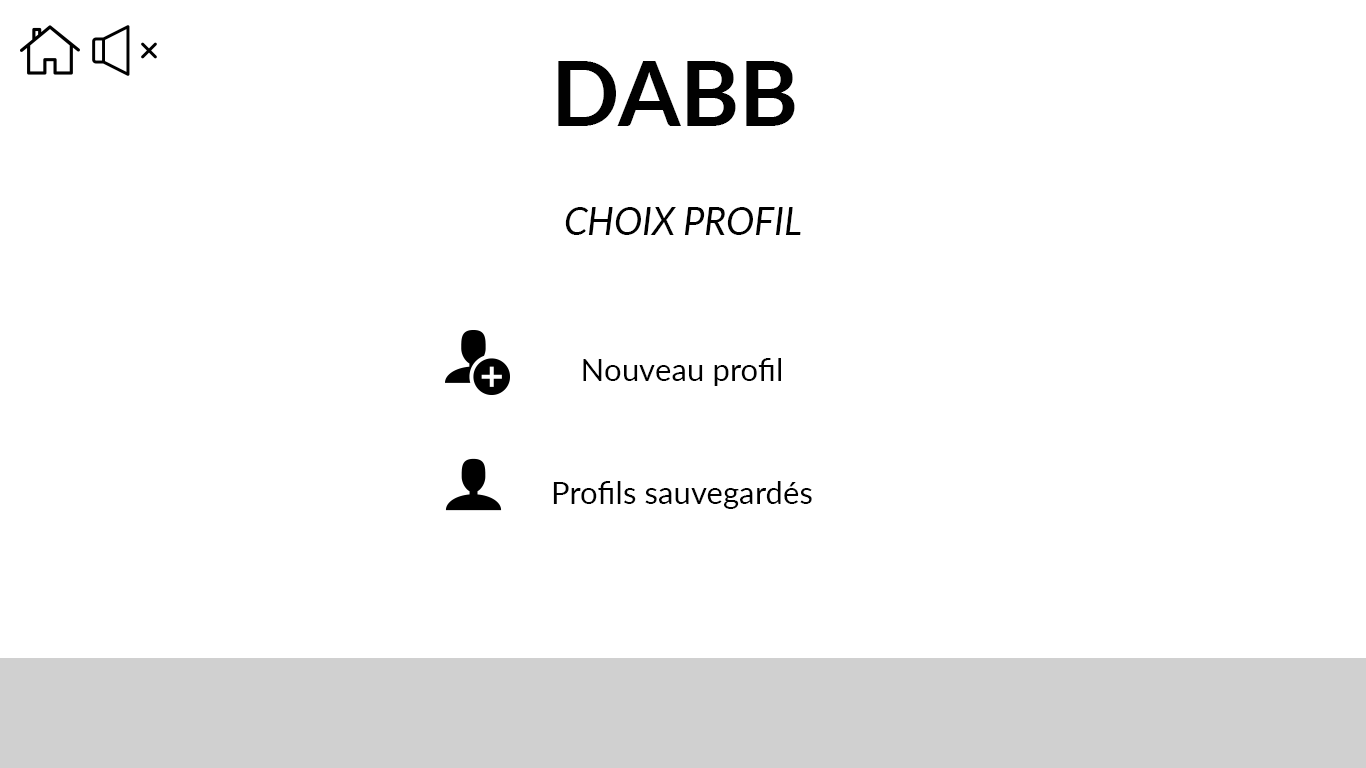
<style>
.page{position:relative;width:1366px;height:768px;background:#ffffff}
.page>*{position:absolute;margin:0}
.t1{font:90px "Lato-Bold";color:#010101}
.t2{font:37.5px "Lato-Italic";color:#000000}
.t3{font:31.2px "Lato-Regular";color:#000000}
</style>
<div class="page">
<p class="t1" style="left:558px;top:61px;width:237px;height:65px">DABB</p>
<p class="t2" style="left:565px;top:207px;width:236px;height:28px">CHOIX PROFIL</p>
<p class="t3" style="left:583px;top:358px;width:198px;height:28px">Nouveau profil</p>
<p class="t3" style="left:553px;top:481px;width:259px;height:28px">Profils sauvegardés</p>
</div>
